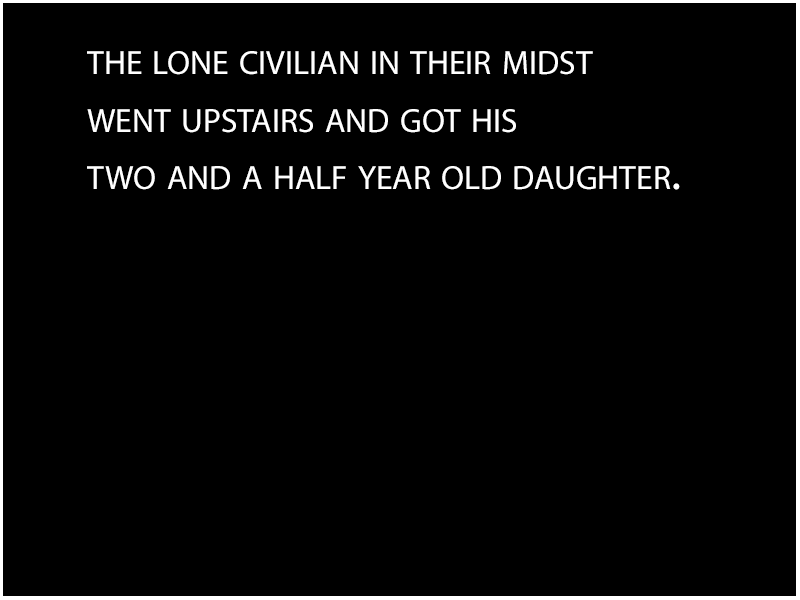
<style>
.page{position:relative;width:800px;height:600px;background:#000000}
.page>*{position:absolute;margin:0}
.t1{font:48px "MyriadPro-Regular";color:#ffffff;font-variant:small-caps}
</style>
<div class="page">
<p class="t1" style="left:87px;top:51px;width:593px;height:139px">the lone civilian in their midst <br>went upstairs and got his <br>two and a half year old daughter.</p>
</div>
